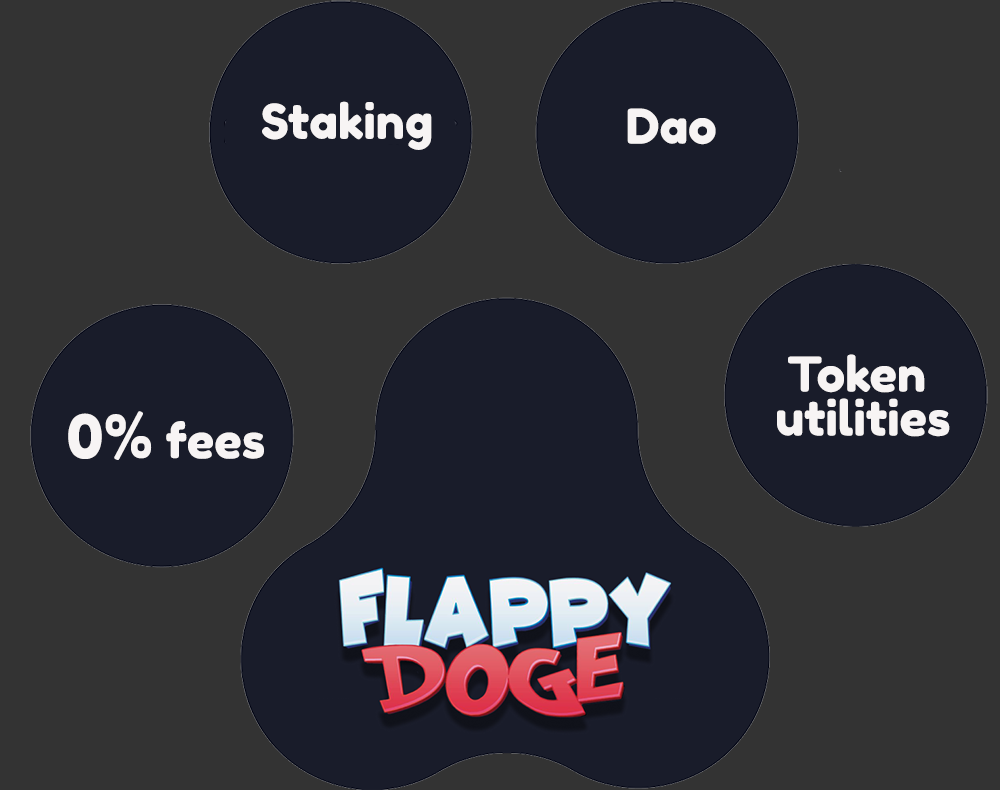
<style>
.page{position:relative;width:1000px;height:790px;background:#333333}
.page>*{position:absolute;margin:0}
.t1{font:48px "FredokaOne-Regular";color:#f7f4f4}
.t2{font:48px/44px "FredokaOne-Regular";color:#f7f4f4}
.t3{font:60px "FredokaOne-Regular";color:#f7f4f4}
</style>
<div class="page">
<p class="t1" style="left:262px;top:101px;width:170px;height:49px">Staking</p>
<p class="t1" style="left:627px;top:108px;width:89px;height:37px">Dao</p>
<p class="t2" style="left:777px;top:354px;width:173px;height:83px;text-align:center">Token <br>utilities</p>
<p class="t1" style="left:68px;top:411px;width:196px;height:49px"><span class="t3">0%</span> fees</p>
</div>
